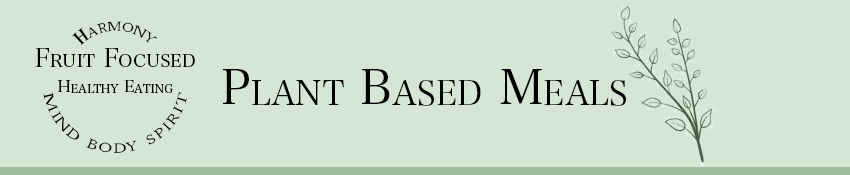
<style>
.page{position:relative;width:850px;height:175px;background:#d5e6d4}
.page>*{position:absolute;margin:0}
.t1{font:16.7px "HiraMinProN-W3";color:#000000;font-variant:small-caps}
.t2{font:16.7px "HiraMinProN-W3";color:#000000}
.t3{font:26px "HiraMinProN-W3";color:#000000;font-variant:small-caps}
.t4{font:48px "HiraMinProN-W3";color:#000000;font-variant:small-caps}
</style>
<div class="page">
<p class="t1" style="left:72px;top:21px;width:86px;height:24px"><span class="t2">Ｈ</span>armony</p>
<p class="t3" style="left:35px;top:48px;width:160px;height:19px">Fruit Focused</p>
<p class="t4" style="left:223px;top:69px;width:403px;height:37px">Plant Based Meals</p>
<p class="t1" style="left:58px;top:80px;width:115px;height:13px">Healthy Eating</p>
<p class="t1" style="left:43px;top:92px;width:145px;height:61px;text-align:center">mind body spirit</p>
</div>
